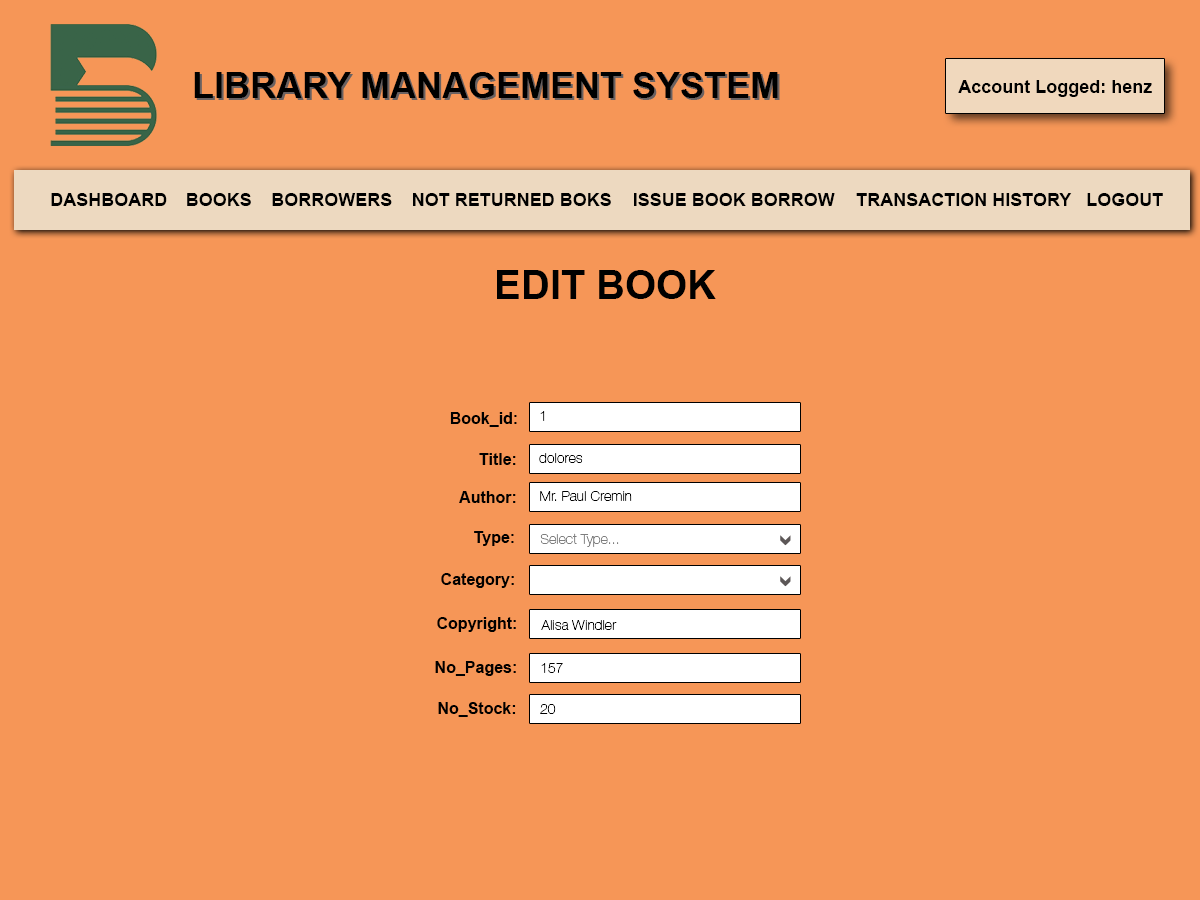
<style>
.page{position:relative;width:1200px;height:900px;background:#f69657}
.page>*{position:absolute;margin:0}
.t1{font:36px "Arial-BoldMT";color:#000000}
.t2{font:18px "Arial-BoldMT";color:#000000}
.t3{font:40px "Arial-BoldMT";color:#000000}
.t4{font:16px "Arial-BoldMT";color:#000000}
.t5{font:14px "HelveticaNeueLTStd-Th";color:#000000;text-transform:uppercase}
.t6{font:14px "HelveticaNeueLTStd-Th";color:#000000}
.t7{font:14px "HelveticaNeueLTStd-Th";color:#7e7e7e}
</style>
<div class="page">
<p class="t1" style="left:194px;top:72px;width:584px;height:26px">LIBRARY MANAGEMENT SYSTEM</p>
<p class="t2" style="left:958px;top:80px;width:194px;height:17px">Account Logged: henz</p>
<p class="t2" style="left:51px;top:193px;width:116px;height:13px">DASHBOARD</p>
<p class="t2" style="left:187px;top:193px;width:64px;height:13px">BOOKS</p>
<p class="t2" style="left:272px;top:193px;width:120px;height:13px">BORROWERS</p>
<p class="t2" style="left:413px;top:193px;width:198px;height:13px">NOT RETURNED BOKS</p>
<p class="t2" style="left:634px;top:193px;width:201px;height:13px">ISSUE BOOK BORROW</p>
<p class="t2" style="left:856px;top:193px;width:216px;height:13px">TRANSACTION HISTORY</p>
<p class="t2" style="left:1087px;top:193px;width:76px;height:13px">LOGOUT</p>
<p class="t3" style="left:497px;top:270px;width:219px;height:29px">EDIT BOOK</p>
<p class="t4" style="left:450px;top:412px;width:67px;height:15px">Book_id:</p>
<p class="t5" style="left:540px;top:411px;width:5px;height:10px">1</p>
<p class="t4" style="left:479px;top:453px;width:37px;height:12px">Title:</p>
<p class="t6" style="left:539px;top:453px;width:44px;height:10px">dolores</p>
<p class="t4" style="left:459px;top:491px;width:57px;height:12px">Author:</p>
<p class="t6" style="left:540px;top:491px;width:92px;height:10px">Mr. Paul Cremin</p>
<p class="t4" style="left:474px;top:531px;width:40px;height:15px">Type:</p>
<p class="t7" style="left:540px;top:533px;width:79px;height:14px">Select Type...</p>
<p class="t4" style="left:441px;top:573px;width:73px;height:15px">Category:</p>
<p class="t4" style="left:437px;top:617px;width:79px;height:15px">Copyright:</p>
<p class="t6" style="left:541px;top:620px;width:76px;height:10px">Alisa Windler</p>
<p class="t4" style="left:435px;top:661px;width:81px;height:15px">No_Pages:</p>
<p class="t6" style="left:541px;top:663px;width:22px;height:10px">157</p>
<p class="t4" style="left:438px;top:702px;width:78px;height:15px">No_Stock:</p>
<p class="t6" style="left:540px;top:704px;width:16px;height:10px">20</p>
</div>
